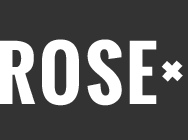
<style>
.page{position:relative;width:188px;height:140px;background:#333333}
.page>*{position:absolute;margin:0}
.t1{font:72px "Oswald-Bold";letter-spacing:-0.075em;color:#ffffff}
</style>
<div class="page">
<p class="t1" style="left:0px;top:39px;width:157px;height:67px">R O S E</p>
<p class="t1" style="left:161px;top:60px;width:22px;height:22px;rotate:43deg">+</p>
</div>
